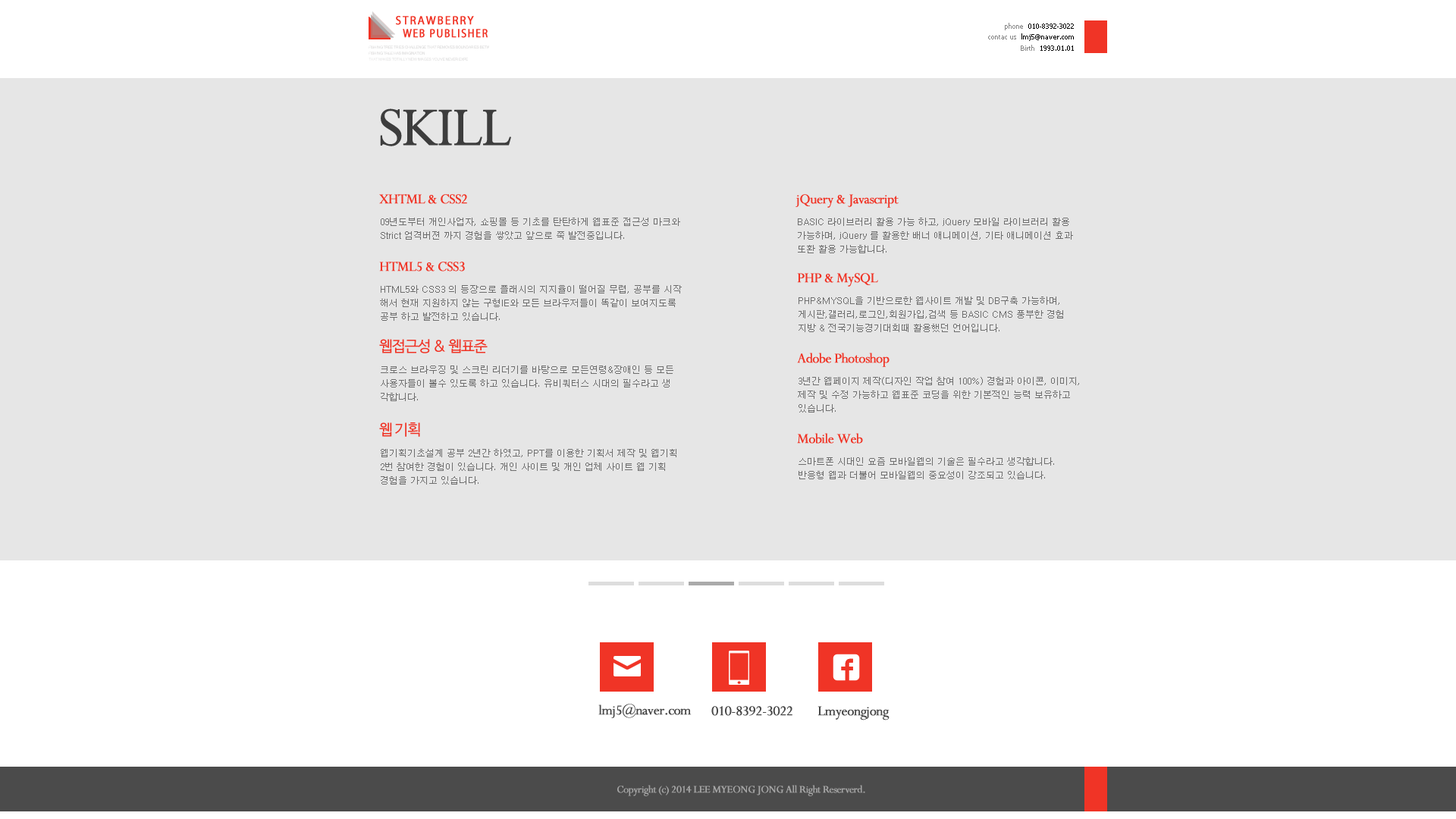
<style>
.page{position:relative;width:1456px;height:819px;background:#e6e6e6}
.page>*{position:absolute;margin:0}
.t1{font:12.1px "MyriadPro-Regular";letter-spacing:0.1em;color:#f03426;font-weight:bold;scale:0.95 1}
.t2{font:12.1px "MyriadPro-Regular";letter-spacing:0.1em;color:#f03426;font-weight:bold;scale:0.85 1}
.t3{font:6.8px "Tahoma";color:#000000}
.t4{font:6.8px "Tahoma";color:#888888}
.t5{font:60.7px "Perpetua";letter-spacing:-0.05em;color:#3d3d3d;font-weight:bold}
.t6{font:15.2px "Perpetua";letter-spacing:-0.05em;color:#f03426;font-weight:bold}
.t7{font:9.1px/13.6px "Dotum";color:#6e6e6e}
.t8{font:15.2px "NanumBarunGothic";letter-spacing:-0.05em;color:#f03426}
.t9{font:15.2px "Perpetua";letter-spacing:-0.05em;color:#484848;font-weight:bold}
.t10{font:11.4px "Perpetua";letter-spacing:-0.05em;color:#a5a5a5;font-weight:bold}
</style>
<div class="page">
<p class="t1" style="left:396px;top:16px;width:78px;height:9px">STRAWBERRY</p>
<p class="t2" style="left:403px;top:29px;width:85px;height:9px">WEB PUBLISHER</p>
<p class="t3" style="left:1005px;top:23px;width:69px;height:7px"><span class="t4">phone  </span>010-8392-3022</p>
<p class="t3" style="left:988px;top:33px;width:86px;height:8px"><span class="t4">contac us  </span>lmj5@naver.com</p>
<p class="t3" style="left:1021px;top:45px;width:53px;height:6px"><span class="t4">Birth  </span>1993.01.01</p>
<p class="t5" style="left:380px;top:108px;width:131px;height:38px">SKILL</p>
<p class="t6" style="left:379px;top:194px;width:88px;height:10px">XHTML &amp; CSS2</p>
<p class="t6" style="left:795px;top:194px;width:104px;height:14px">jQuery &amp; Javascript</p>
<p class="t7" style="left:381px;top:218px;width:299px;height:22px">09년도부터 개인사업자, 쇼핑몰 등 기초를 탄탄하게 웹표준 접근성 마크와<br>Strict 엄격버젼 까지 경험을 쌓았고 앞으로 쭉 발전중입니다.</p>
<p class="t7" style="left:798px;top:218px;width:275px;height:35px">BASIC 라이브러리 활용 가능 하고, jQuery 모바일 라이브러리 활용<br>가능하며, jQuery 를 활용한 배너 애니메이션, 기타 애니메이션 효과 <br>또환 활용 가능합니다.</p>
<p class="t6" style="left:379px;top:262px;width:86px;height:9px">HTML5 &amp; CSS3</p>
<p class="t6" style="left:797px;top:273px;width:81px;height:14px">PHP &amp; MySQL</p>
<p class="t7" style="left:380px;top:285px;width:302px;height:36px">HTML5와 CSS3 의 등장으로 플래시의 지지율이 떨어질 무렵, 공부를 시작<br>해서 현재 지원하지 않는 구형IE와 모든 브라우저들이 똑같이 보여지도록<br>공부 하고 발전하고 있습니다.</p>
<p class="t7" style="left:799px;top:297px;width:264px;height:35px">PHP&amp;MYSQL을 기반으로한 웹사이트 개발 및 DB구축 가능하며,<br>게시판,갤러리,로그인,회원가입,검색 등 BASIC CMS 풍부한 경험<br>지방 &amp; 전국기능경기대회때 활용했던 언어입니다.</p>
<p class="t8" style="left:379px;top:339px;width:109px;height:14px">웹접근성 &amp; 웹표준</p>
<p class="t6" style="left:797px;top:353px;width:93px;height:14px">Adobe Photoshop</p>
<p class="t7" style="left:381px;top:366px;width:292px;height:35px">크로스 브라우징 및 스크린 리더기를 바탕으로 모든연령&amp;장애인 등 모든 <br>사용자들이 볼수 있도록 하고 있습니다. 유비쿼터스 시대의 필수라고 생<br>각합니다.</p>
<p class="t7" style="left:798px;top:377px;width:281px;height:36px">3년간 웹페이지 제작(디자인 작업 참여 100%) 경험과 아이콘, 이미지,<br>제작 및 수정 가능하고 웹표준 코딩을 위한 기본적인 능력 보유하고<br>있습니다.</p>
<p class="t8" style="left:379px;top:422px;width:41px;height:15px">웹 기획</p>
<p class="t6" style="left:797px;top:433px;width:66px;height:11px">Mobile Web</p>
<p class="t7" style="left:381px;top:449px;width:295px;height:36px">웹기획기초설계 공부 2년간 하였고, PPT를 이용한 기획서 제작 및 웹기획 <br>2번 참여한 경험이 있습니다. 개인 사이트 및 개인 업체 사이트 웹 기획 <br>경험을 가지고 있습니다.</p>
<p class="t7" style="left:799px;top:457px;width:255px;height:22px">스마트폰 시대인 요즘 모바일웹의 기술은 필수라고 생각합니다.<br>반응형 웹과 더불어 모바일웹의 중요성이 강조되고 있습니다.</p>
<p class="t9" style="left:598px;top:704px;width:94px;height:14px">lmj5@naver.com</p>
<p class="t9" style="left:711px;top:706px;width:81px;height:10px">010-8392-3022</p>
<p class="t9" style="left:817px;top:706px;width:73px;height:14px">Lmyeongjong</p>
<p class="t10" style="left:617px;top:785px;width:248px;height:11px">Copyright (c) 2014 LEE MYEONG JONG All Right Reserverd.</p>
</div>
